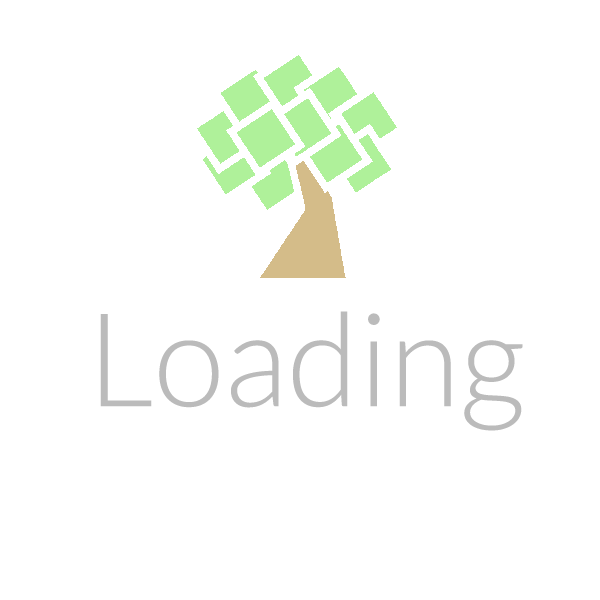
<style>
.page{position:relative;width:600px;height:600px;background:#ffffff}
.page>*{position:absolute;margin:0}
.t1{font:130px "Lato-Light";color:#bbbbbb}
</style>
<div class="page">
<p class="t1" style="left:100px;top:311px;width:423px;height:120px">Loading</p>
</div>
